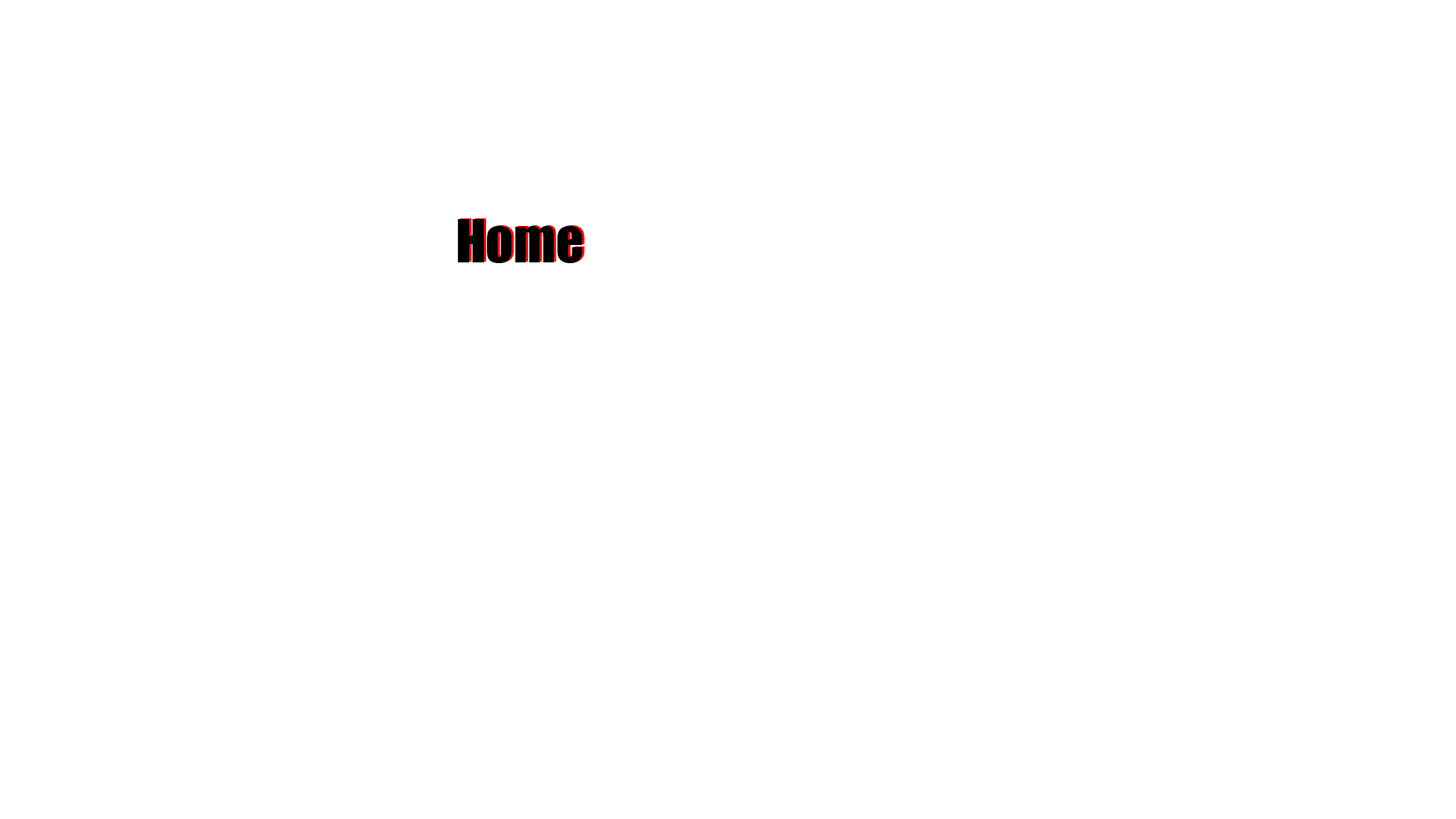
<style>
.page{position:relative;width:1456px;height:819px;background:#ffffff}
.page>*{position:absolute;margin:0}
.t1{font:54.6px "Impact";color:#000000}
</style>
<div class="page">
<p class="t1" style="left:457px;top:219px;width:125px;height:44px">Home</p>
<p class="t1" style="left:460px;top:218px;width:125px;height:44px">Home</p>
</div>
